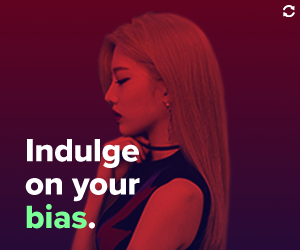
<style>
.page{position:relative;width:300px;height:250px}
.page>*{position:absolute;margin:0}
.t1{font:33.3px/33.3px "ProximaNova-Extrabld";color:#ffffff}
.t2{font:33.3px/33.3px "ProximaNova-Extrabld";color:#7bff97}
</style>
<div class="page">
<p class="t1" style="left:25px;top:139px;width:115px;height:90px">Indulge on your <span class="t2">bias</span>.</p>
</div>
